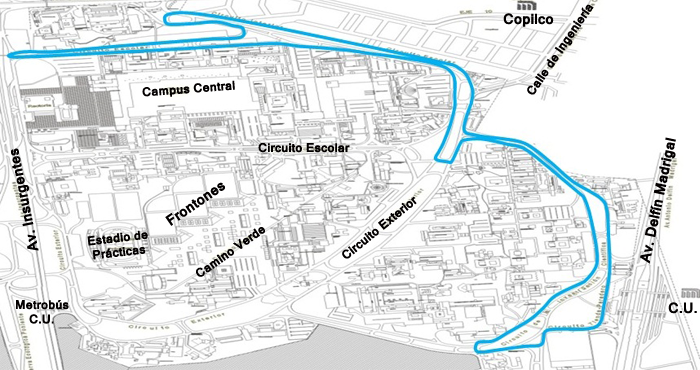
<style>
.page{position:relative;width:700px;height:370px;background:#ffffff}
.page>*{position:absolute;margin:0}
.t1{font:12px "Kartika-Bold";color:#030000}
.t2{font:14px "Kartika-Bold";color:#030000}
</style>
<div class="page">
<p class="t1" style="left:527px;top:4px;width:67px;height:91px;rotate:-56deg">Calle de Ingeniería</p>
<p class="t2" style="left:503px;top:13px;width:51px;height:14px">Copilco</p>
<p class="t1" style="left:142px;top:80px;width:93px;height:17px;rotate:-4deg">Campus Central</p>
<p class="t2" style="left:640px;top:137px;width:36px;height:127px;rotate:-78deg">Av. Delfín Madrigal</p>
<p class="t2" style="left:11px;top:148px;width:28px;height:103px;rotate:-101deg">Av. Insurgentes</p>
<p class="t1" style="left:258px;top:142px;width:92px;height:11px">Circuito Escolar</p>
<p class="t2" style="left:165px;top:182px;width:60px;height:44px;rotate:-35deg">Frontones</p>
<p class="t1" style="left:342px;top:196px;width:75px;height:63px;rotate:-39deg">Circuito Exterior</p>
<p class="t1" style="left:87px;top:230px;width:61px;height:30px;rotate:-7deg">Estadio de<br> Prácticas</p>
<p class="t1" style="left:196px;top:227px;width:69px;height:50px;rotate:-35deg">Camino Verde</p>
<p class="t1" style="left:16px;top:300px;width:53px;height:24px">Metrobús<br>    C.U.</p>
<p class="t2" style="left:668px;top:302px;width:29px;height:12px">C.U.</p>
</div>
